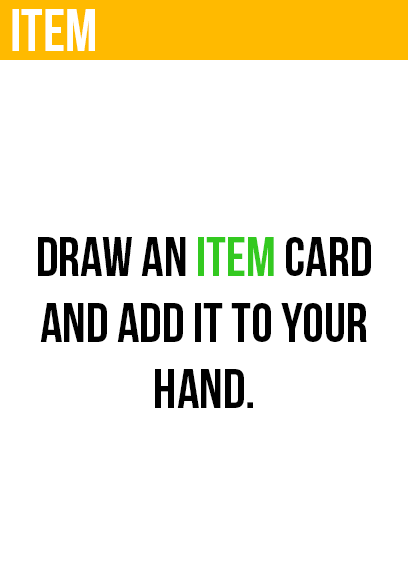
<style>
.page{position:relative;width:408px;height:585px;background:#ffffff}
.page>*{position:absolute;margin:0}
.t1{font:60px "BebasNeue";color:#ffffff}
.t2{font:55px "BebasNeue";color:#000000}
.t3{font:55px "BebasNeue";color:#33c920}
</style>
<div class="page">
<p class="t1" style="left:12px;top:9px;width:83px;height:42px">item</p>
<p class="t2" style="left:38px;top:237px;width:333px;height:171px;text-align:center">draw an <span class="t3">item </span>card<br>and add it to your<br>hand.</p>
</div>
